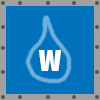
<style>
.page{position:relative;width:100px;height:100px;background:#0072bc}
.page>*{position:absolute;margin:0}
.t1{font:27.3px "Impact";color:#ffffff}
</style>
<div class="page">
<p class="t1" style="left:38px;top:50px;width:24px;height:21px">W</p>
</div>
